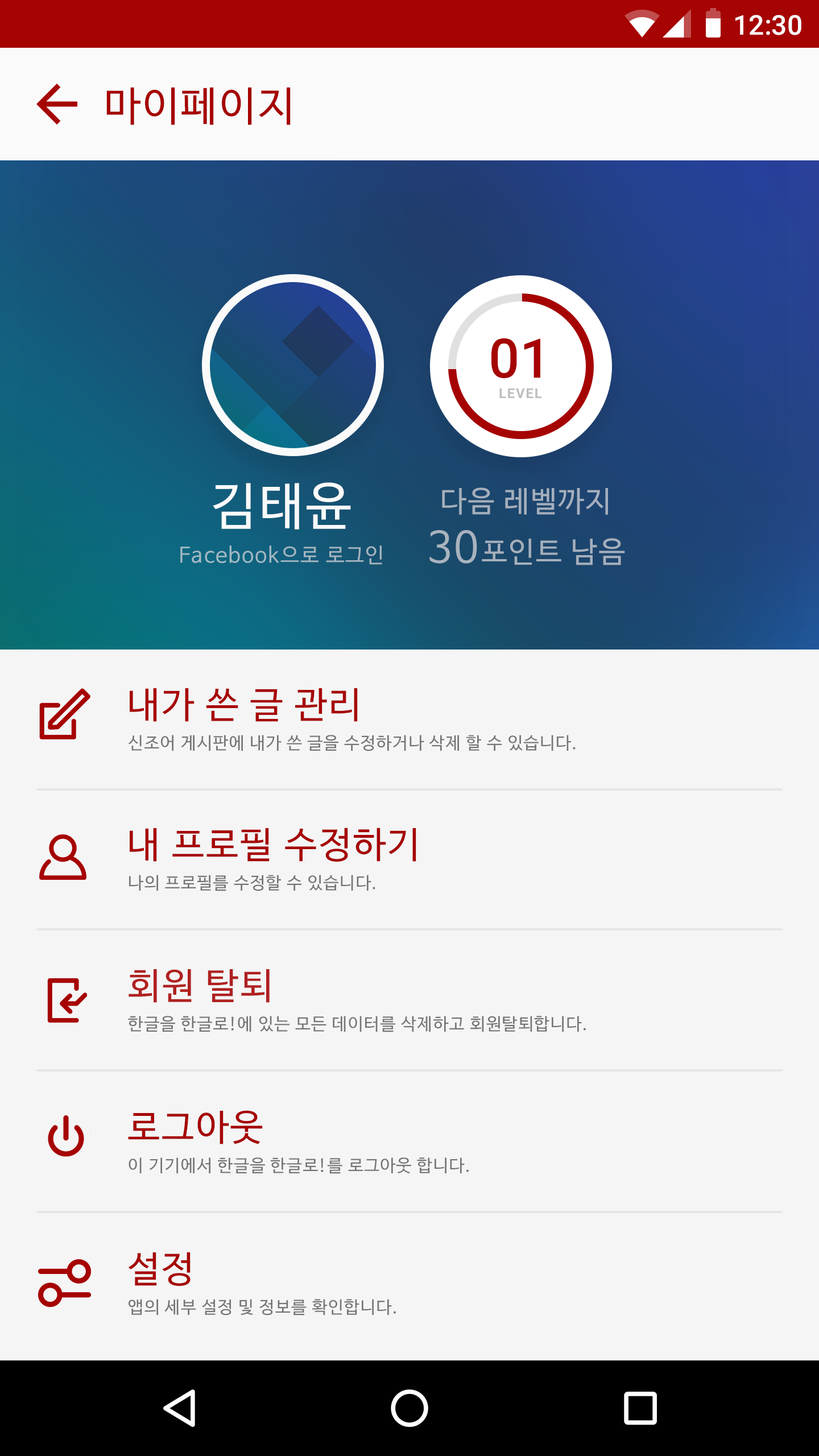
<style>
.page{position:relative;width:819px;height:1456px;background:#f5f5f5}
.page>*{position:absolute;margin:0}
.t1{font:27.3px "Roboto-Medium";color:#ffffff}
.t2{font:40.9px "NanumBarunGothic";letter-spacing:0.05em;color:#a60303}
.t3{font:54.6px "Roboto-Medium";color:#a60303}
.t4{font:13.6px "Roboto-Bold";letter-spacing:0.075em;color:#bdbdbd}
.t5{font:50.6px "NanumBarunGothic";letter-spacing:0.05em;color:#fafafa}
.t6{font:29.1px/50.7px "NanumBarunGothic";letter-spacing:0.05em;color:#a5afbc}
.t7{font:42.5px/50.7px "NanumBarunGothic";letter-spacing:0.05em;color:#a5afbc}
.t8{font:21.1px "NanumBarunGothic";letter-spacing:0.05em;color:#a3b7c2}
.t9{font:36.4px "NanumBarunGothic";letter-spacing:0.05em;color:#a70606}
.t10{font:17.1px "NanumBarunGothic";letter-spacing:0.05em;color:#757575}
.t11{font:36.4px "NanumBarunGothic";letter-spacing:0.05em;color:#a60303}
.t12{font:36.4px "NanumBarunGothic";letter-spacing:0.05em;color:#b02020}
.t13{font:36.4px "NanumBarunGothic";letter-spacing:0.05em;color:#a70505}
</style>
<div class="page">
<p class="t1" style="left:735px;top:15px;width:66px;height:20px">12:30</p>
<p class="t2" style="left:106px;top:87px;width:185px;height:38px">마이페이지</p>
<p class="t3" style="left:491px;top:338px;width:49px;height:40px">01</p>
<p class="t4" style="left:499px;top:388px;width:43px;height:10px">LEVEL</p>
<p class="t5" style="left:213px;top:482px;width:138px;height:47px">김태윤</p>
<p class="t6" style="left:429px;top:487px;width:196px;height:78px;text-align:center">다음 레벨까지<br><span class="t7">30</span>포인트 남음</p>
<p class="t8" style="left:180px;top:545px;width:202px;height:20px">Facebook으로 로그인</p>
<p class="t9" style="left:130px;top:688px;width:228px;height:34px">내가 쓴 글 관리</p>
<p class="t10" style="left:128px;top:735px;width:448px;height:16px">신조어 게시판에 내가 쓴 글을 수정하거나 삭제 할 수 있습니다.</p>
<p class="t11" style="left:130px;top:828px;width:286px;height:34px">내 프로필 수정하기</p>
<p class="t10" style="left:129px;top:875px;width:246px;height:16px">나의 프로필를 수정할 수 있습니다.</p>
<p class="t12" style="left:129px;top:969px;width:141px;height:34px">회원 탈퇴</p>
<p class="t10" style="left:128px;top:1016px;width:458px;height:16px">한글을 한글로!에 있는 모든 데이터를 삭제하고 회원탈퇴합니다.</p>
<p class="t11" style="left:128px;top:1110px;width:135px;height:34px">로그아웃</p>
<p class="t10" style="left:129px;top:1157px;width:340px;height:17px">이 기기에서 한글을 한글로!를 로그아웃 합니다.</p>
<p class="t13" style="left:128px;top:1252px;width:63px;height:34px">설정</p>
<p class="t10" style="left:129px;top:1299px;width:267px;height:17px">앱의 세부 설정 및 정보를 확인합니다.</p>
</div>
